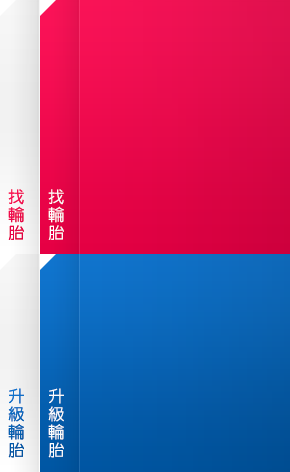
<style>
.page{position:relative;width:290px;height:472px}
.page>*{position:absolute;margin:0}
.t1{font:16px/18px "NewGothic-Medium";letter-spacing:0.1em;color:#ea074b}
.t2{font:16px/18px "NewGothic-Medium";letter-spacing:0.1em;color:#ffffff}
.t3{font:16px/18px "NewGothic-Medium";letter-spacing:0.1em;color:#0660b0}
</style>
<div class="page">
<p class="t1" style="left:8px;top:189px;width:16px;height:51px">找<br>輪<br>胎</p>
<p class="t1" style="left:8px;top:189px;width:16px;height:51px">找<br>輪<br>胎</p>
<p class="t2" style="left:48px;top:189px;width:16px;height:51px">找<br>輪<br>胎</p>
<p class="t3" style="left:8px;top:388px;width:16px;height:70px">升<br>級<br>輪<br>胎</p>
<p class="t3" style="left:8px;top:388px;width:16px;height:70px">升<br>級<br>輪<br>胎</p>
<p class="t2" style="left:48px;top:388px;width:16px;height:70px">升<br>級<br>輪<br>胎</p>
</div>
